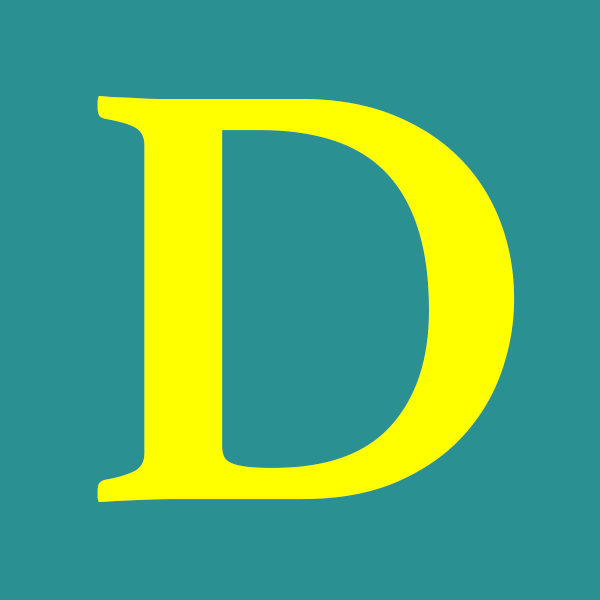
<style>
.page{position:relative;width:600px;height:600px;background:#2a9091}
.page>*{position:absolute;margin:0}
.t1{font:616.5px "Athelas-Bold";color:#ffff00}
</style>
<div class="page">
<p class="t1" style="left:97px;top:96px;width:418px;height:406px">D</p>
</div>
